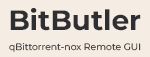
<style>
.page{position:relative;width:150px;height:57px;background:#f5ede3}
.page>*{position:absolute;margin:0}
.t1{font:28px "Montserrat-Bold";color:#2f2f33}
.t2{font:9.3px "Montserrat-Regular"}
</style>
<div class="page">
<p class="t1" style="left:10px;top:8px;width:131px;height:23px">BitButler</p>
<p class="t2" style="left:9px;top:43px;width:132px;height:9px">qBittorrent-nox Remote GUI</p>
</div>
